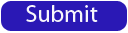
<style>
.page{position:relative;width:128px;height:33px;background:#2a18b5}
.page>*{position:absolute;margin:0}
.t1{font:24px "MyriadPro-Regular";color:#f7f6fb}
</style>
<div class="page">
<p class="t1" style="left:26px;top:5px;width:72px;height:17px">Submit</p>
</div>
